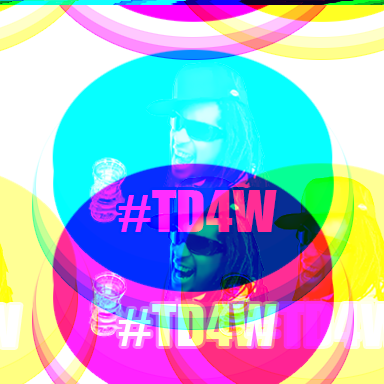
<style>
.page{position:relative;width:384px;height:384px}
.page>*{position:absolute;margin:0}
.t1{font:53.3px "Impact"}
</style>
<div class="page">
<p class="t1" style="left:118px;top:185px;width:159px;height:42px">#TD4W</p>
</div>
